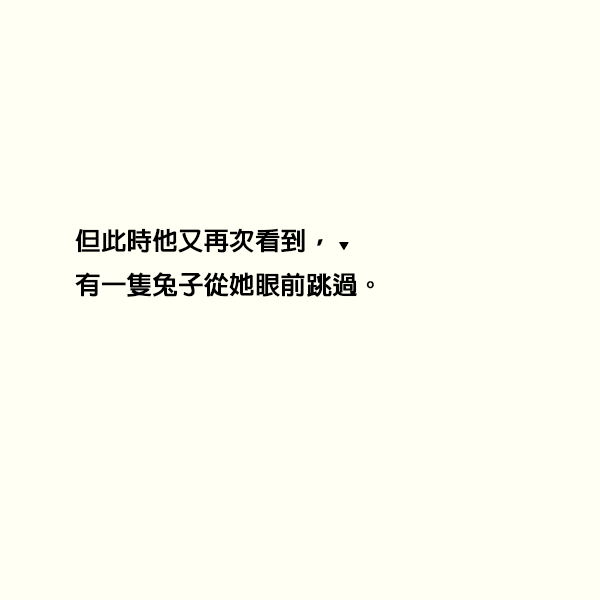
<style>
.page{position:relative;width:600px;height:600px;background:#fffff3}
.page>*{position:absolute;margin:0}
.t1{font:25px "AdobeFanHeitiStd-Bold";color:#000000;font-weight:bold}
.t2{font:10.7px "AdobeFanHeitiStd-Bold";color:#000000;font-weight:bold}
</style>
<div class="page">
<p class="t1" style="left:75px;top:228px;width:299px;height:69px">但此時他又再次看到， <span class="t2">▼<br></span>有一隻兔子從她眼前跳過。</p>
</div>
